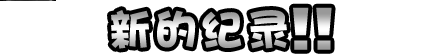
<style>
.page{position:relative;width:448px;height:56px;background:#ffffff}
.page>*{position:absolute;margin:0}
.t1{font:43px "DFPHaiBaoW12";letter-spacing:0.05em}
.t2{font:70px "MarioKartPositionFontRegular";letter-spacing:0.05em;scale:0.9 1}
</style>
<div class="page">
<p class="t1" style="left:111px;top:7px;width:221px;height:43px">新的纪录<span class="t2">!!</span></p>
</div>
